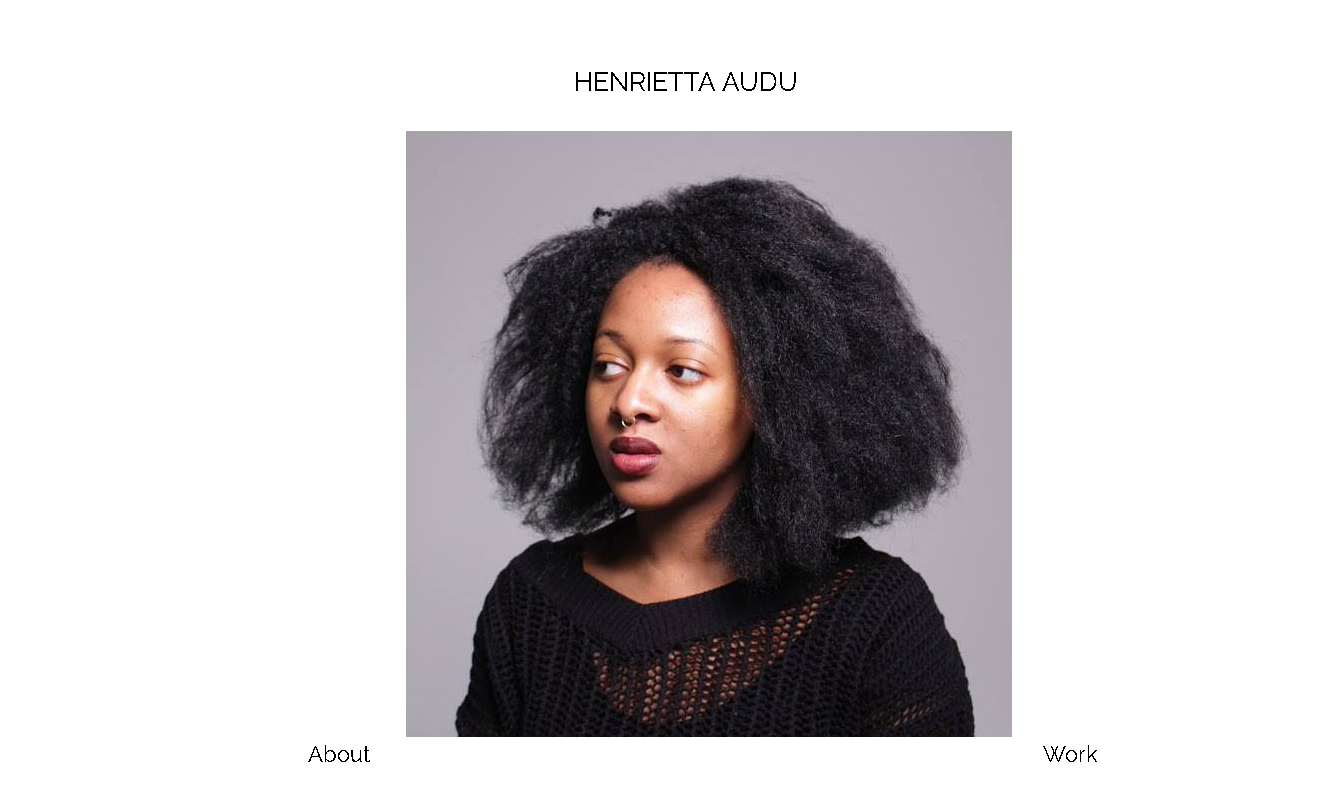
<style>
.page{position:relative;width:1341px;height:806px;background:#ffffff}
.page>*{position:absolute;margin:0}
.t1{font:26px "Raleway";color:#000000}
.t2{font:22px "Raleway";color:#000000}
</style>
<div class="page">
<p class="t1" style="left:576px;top:72px;width:220px;height:19px">HENRIETTA AUDU</p>
<p class="t2" style="left:308px;top:745px;width:62px;height:17px">About</p>
<p class="t2" style="left:1043px;top:745px;width:54px;height:17px">Work</p>
</div>
